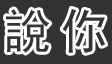
<style>
.page{position:relative;width:112px;height:64px;background:#333333}
.page>*{position:absolute;margin:0}
.t1{font:48px "SimHei";letter-spacing:-0.025em;color:#333333}
</style>
<div class="page">
<p class="t1" style="left:6px;top:9px;width:44px;height:44px">說</p>
<p class="t1" style="left:62px;top:8px;width:44px;height:45px">你</p>
</div>
